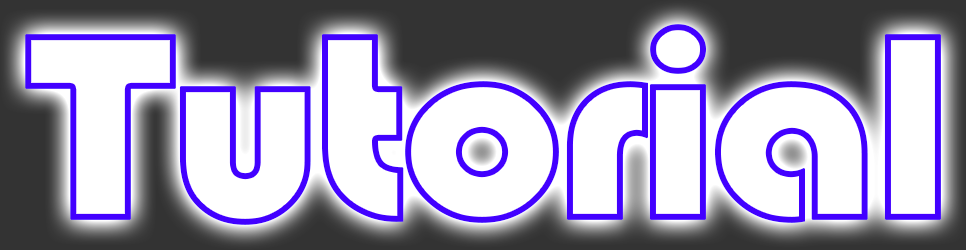
<style>
.page{position:relative;width:966px;height:250px;background:#ffffff}
.page>*{position:absolute;margin:0}
.t1{font:275.7px "Bauhaus93";letter-spacing:-0.07em;color:#ffffff;font-weight:bold;scale:1.08 1}
</style>
<div class="page">
<p class="t1" style="left:25px;top:24px;width:916px;height:201px">Tutorial</p>
</div>
